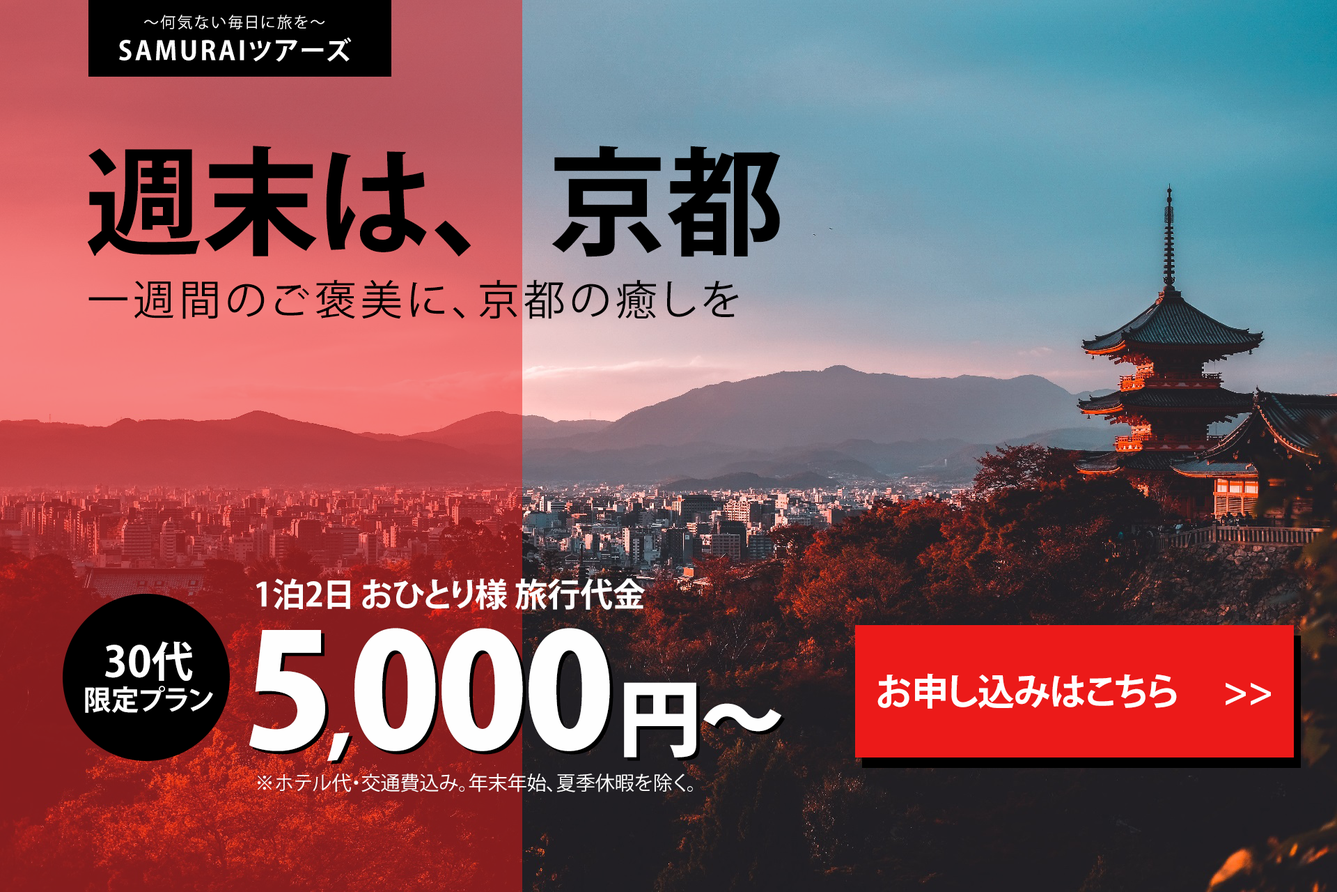
<style>
.page{position:relative;width:1337px;height:892px}
.page>*{position:absolute;margin:0}
.t1{font:15.3px/23px "KozGoPr6N-Regular";letter-spacing:0.1em;color:#fefefe}
.t2{font:25.8px/23px "KozGoPr6N-Bold";letter-spacing:0.1em;color:#fefefe}
.t3{font:117px "KozGoPr6N-Bold";color:#000000}
.t4{font:41.8px "KozGoPr6N-Regular";letter-spacing:0.1em;color:#000000}
.t5{font:32.7px "KozGoPr6N-Bold";color:#fefefe}
.t6{font:156.7px "KozGoPr6N-Heavy";letter-spacing:-0.025em;color:#fefefe}
.t7{font:83.6px "KozGoPr6N-Heavy";letter-spacing:-0.025em;color:#fefefe}
.t8{font:83.6px "KozGoPr6N-Heavy";color:#fefefe}
.t9{font:27.9px/45.3px "KozGoPr6N-Bold";color:#fefefe}
.t10{font:41.8px/45.3px "KozGoPr6N-Bold";color:#fefefe}
.t11{font:36.9px "KozGoPr6N-Bold";color:#fefefe}
.t12{font:19.5px "KozGoPr6N-Regular";color:#fefefe}
</style>
<div class="page">
<p class="t1" style="left:119px;top:15px;width:233px;height:47px;text-align:center">〜何気ない毎日に旅を〜<br><span class="t2">SAMURAIツアーズ</span></p>
<p class="t3" style="left:87px;top:146px;width:694px;height:111px">週末は、京都</p>
<p class="t4" style="left:88px;top:279px;width:651px;height:40px">一週間のご褒美に、京都の癒しを</p>
<p class="t5" style="left:256px;top:578px;width:390px;height:31px">1泊2日 おひとり様 旅行代金</p>
<p class="t6" style="left:249px;top:628px;width:533px;height:133px">5<span class="t7">,</span>000<span class="t8">円〜</span></p>
<p class="t9" style="left:85px;top:641px;width:128px;height:72px;text-align:center"><span class="t10">30代<br></span>限定プラン</p>
<p class="t6" style="left:253px;top:631px;width:532px;height:133px">5<span class="t7">,</span>000<span class="t8">円〜</span></p>
<p class="t11" style="left:878px;top:673px;width:393px;height:35px">お申し込みはこちら 　&gt;&gt;</p>
<p class="t12" style="left:258px;top:773px;width:435px;height:19px">※ホテル代・交通費込み。年末年始、夏季休暇を除く。</p>
</div>
